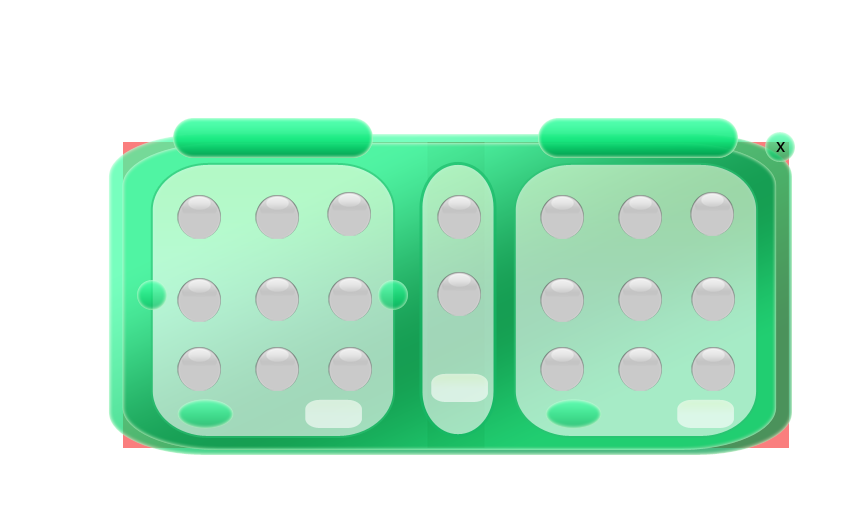
<style>
.page{position:relative;width:866px;height:506px;background:#ffffff}
.page>*{position:absolute;margin:0}
.t1{font:20px "MyriadPro-Regular";color:#000000}
</style>
<div class="page">
<p class="t1" style="left:776px;top:142px;width:9px;height:10px">x</p>
</div>
